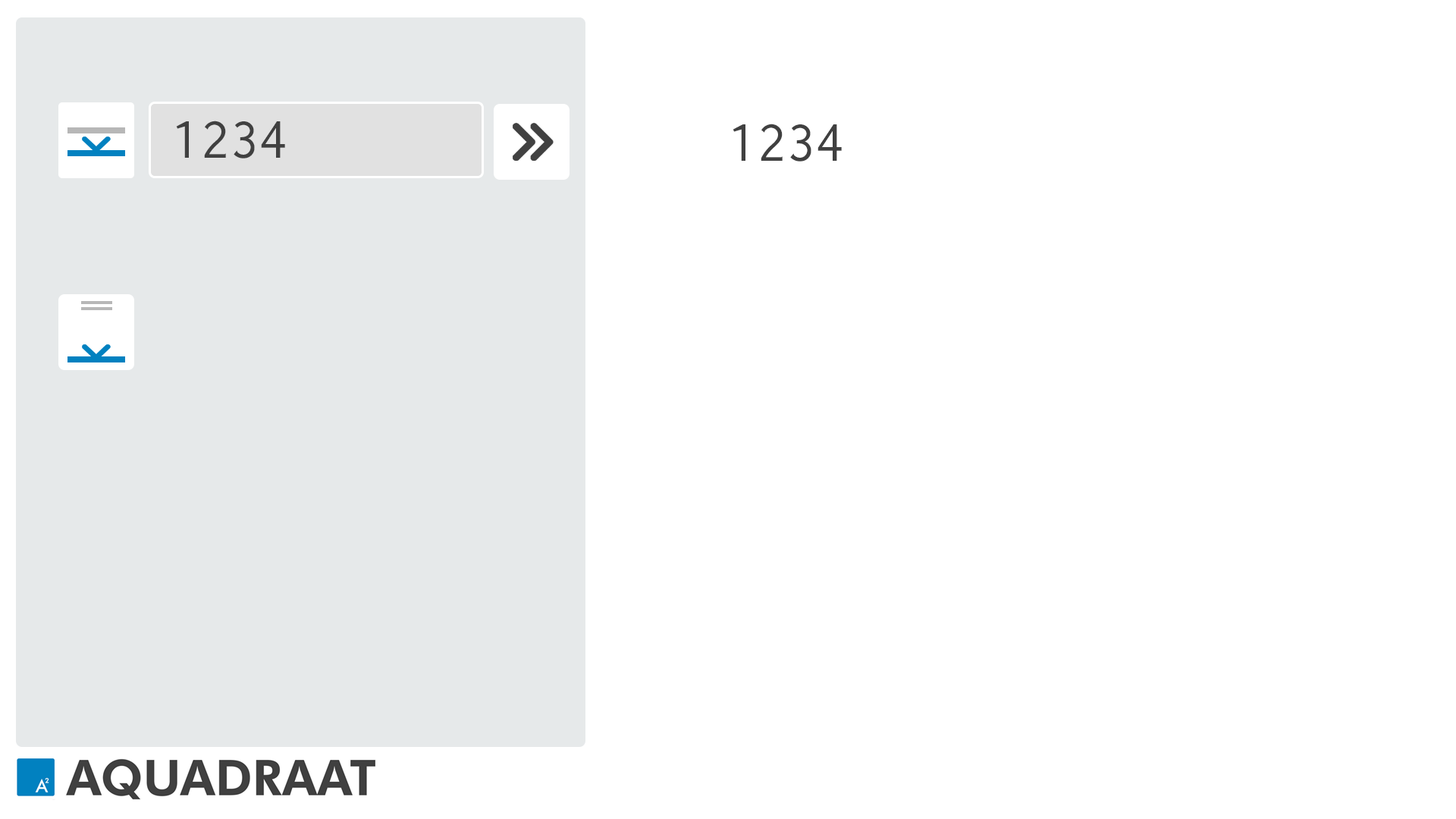
<style>
.page{position:relative;width:1456px;height:819px;background:#ffffff}
.page>*{position:absolute;margin:0}
.t1{font:58.3px "Inconsolata";color:#404040}
</style>
<div class="page">
<p class="t1" style="left:176px;top:121px;width:109px;height:37px">1234</p>
<p class="t1" style="left:733px;top:124px;width:109px;height:38px">1234</p>
</div>
